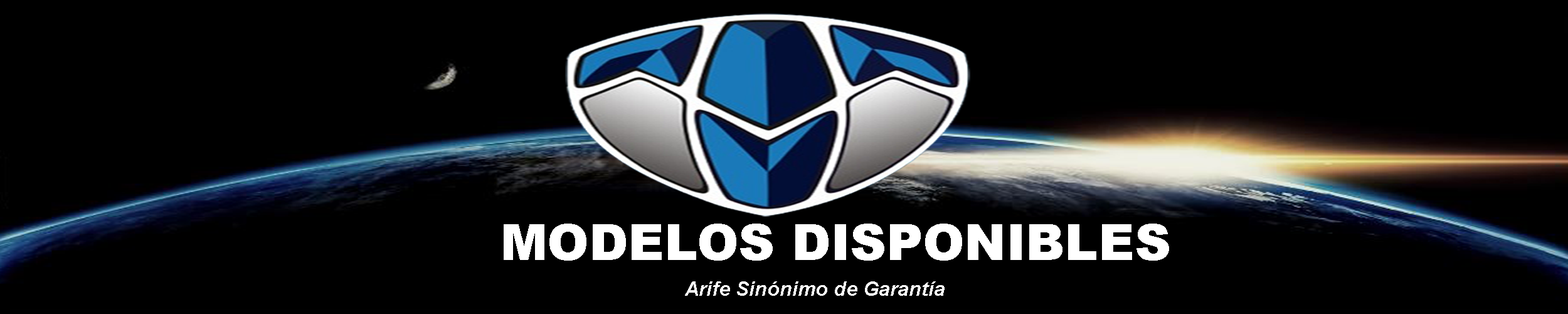
<style>
.page{position:relative;width:1568px;height:314px;background:#000000}
.page>*{position:absolute;margin:0}
.t1{font:50.2px "Arial-Black";color:#ffffff}
.t2{font:20.1px "Arial-BoldItalicMT";color:#ffffff}
</style>
<div class="page">
<p class="t1" style="left:504px;top:223px;width:665px;height:37px">MODELOS DISPONIBLES</p>
<p class="t2" style="left:685px;top:281px;width:260px;height:14px">Arife Sinónimo de Garantía</p>
</div>
